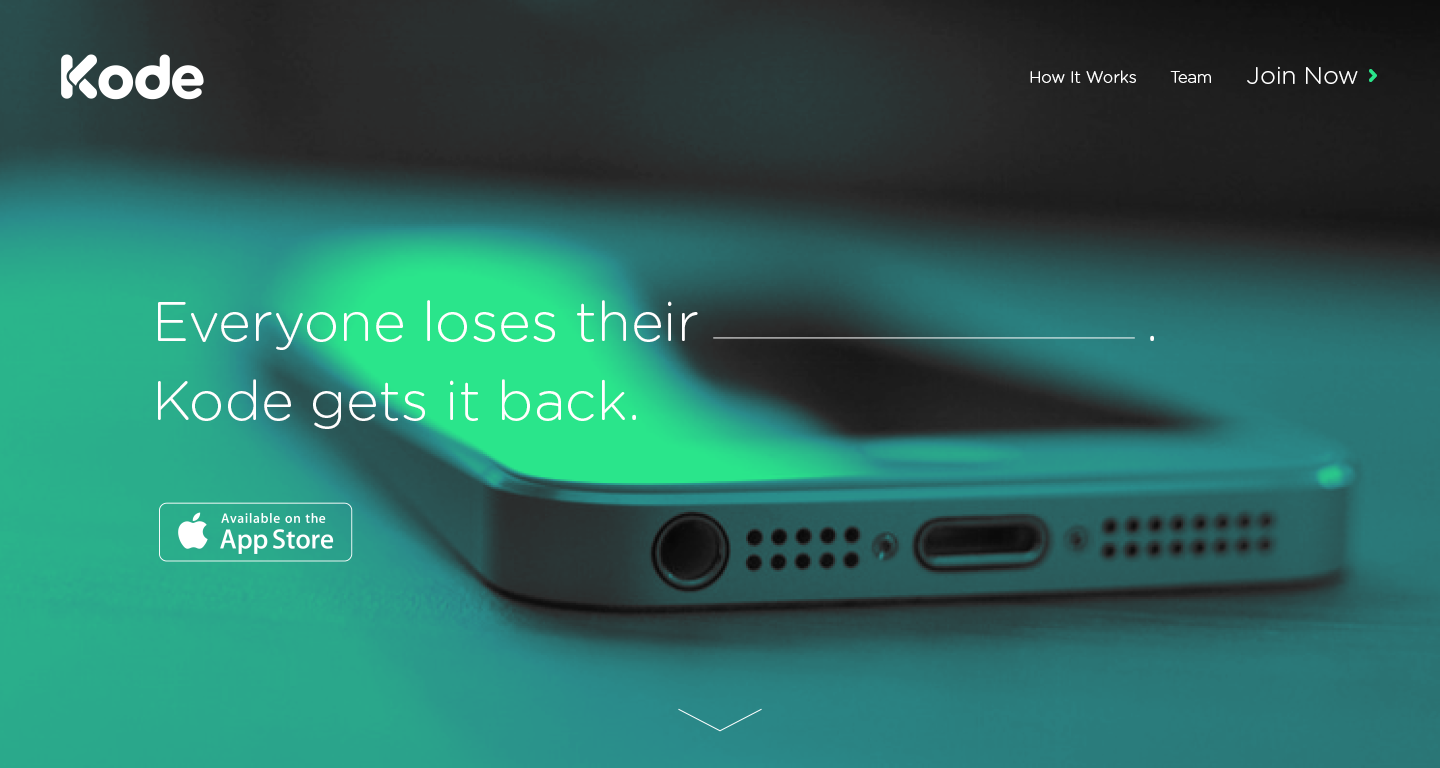
<style>
.page{position:relative;width:1440px;height:768px}
.page>*{position:absolute;margin:0}
.t1{font:16.2px "GothamRounded-Light";color:#ffffff}
.t2{font:24.4px "GothamRounded-Light";color:#ffffff}
.t3{font:24.4px "Junegull-Regular";color:#2ae58b}
.t4{font:55.2px/79.2px "GothamRounded-Light";color:#ffffff}
.t5{font:55.2px/71px "GothamRounded-Light";color:#ffffff}
</style>
<div class="page">
<p class="t1" style="left:1030px;top:70px;width:106px;height:13px">How It Works</p>
<p class="t1" style="left:1170px;top:71px;width:41px;height:12px">Team</p>
<p class="t2" style="left:1247px;top:66px;width:130px;height:18px">Join Now <span class="t3">&gt;</span></p>
<p class="t4" style="left:158px;top:300px;width:996px;height:129px">Everyone loses their                           .<br><br><span class="t5">Kode gets it back.</span></p>
</div>
